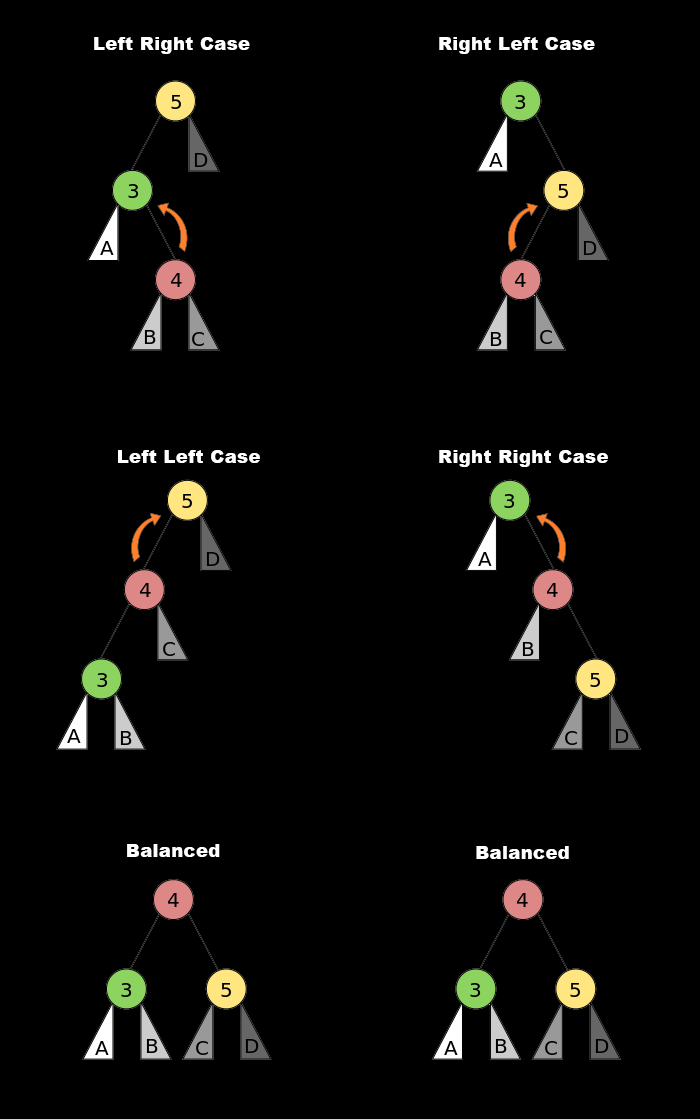
<style>
.page{position:relative;width:700px;height:1119px;background:#000000}
.page>*{position:absolute;margin:0}
.t1{font:18px "Arial-Black";letter-spacing:0.02em;color:#ffffff}
</style>
<div class="page">
<p class="t1" style="left:94px;top:37px;width:156px;height:17px">Left Right Case</p>
<p class="t1" style="left:439px;top:37px;width:156px;height:17px">Right Left Case</p>
<p class="t1" style="left:118px;top:450px;width:142px;height:13px">Left Left Case</p>
<p class="t1" style="left:439px;top:450px;width:169px;height:17px">Right Right Case</p>
<p class="t1" style="left:127px;top:844px;width:93px;height:13px">Balanced</p>
<p class="t1" style="left:476px;top:846px;width:93px;height:13px">Balanced</p>
</div>
